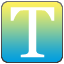
<style>
.page{position:relative;width:64px;height:64px;background:#ffffff}
.page>*{position:absolute;margin:0}
.t1{font:72px "Georgia";color:#ffffff}
</style>
<div class="page">
<p class="t1" style="left:10px;top:7px;width:45px;height:51px">T</p>
</div>
